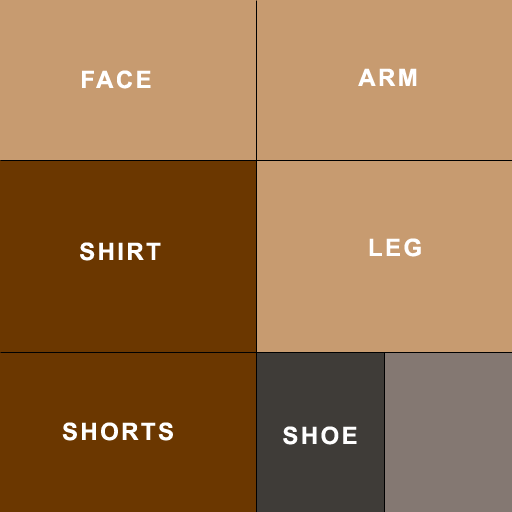
<style>
.page{position:relative;width:512px;height:512px;background:#c79b70}
.page>*{position:absolute;margin:0}
.t1{font:24px "Arial-BoldMT";letter-spacing:0.1em;color:#ffffff}
</style>
<div class="page">
<p class="t1" style="left:82px;top:70px;width:69px;height:19px">FACE</p>
<p class="t1" style="left:358px;top:68px;width:59px;height:18px">ARM</p>
<p class="t1" style="left:80px;top:242px;width:81px;height:19px">SHIRT</p>
<p class="t1" style="left:369px;top:238px;width:52px;height:19px">LEG</p>
<p class="t1" style="left:62px;top:422px;width:111px;height:19px">SHORTS</p>
<p class="t1" style="left:283px;top:426px;width:74px;height:19px">SHOE</p>
</div>
